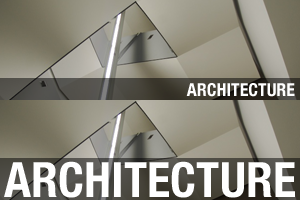
<style>
.page{position:relative;width:300px;height:200px}
.page>*{position:absolute;margin:0}
.t1{font:18px "HelveticaNeue-CondensedBold";color:#ffffff}
.t2{font:48.5px "HelveticaNeue-CondensedBold";color:#ffffff}
</style>
<div class="page">
<p class="t1" style="left:186px;top:83px;width:109px;height:14px">ARCHITECTURE</p>
<p class="t2" style="left:4px;top:161px;width:291px;height:37px">ARCHITECTURE</p>
</div>
